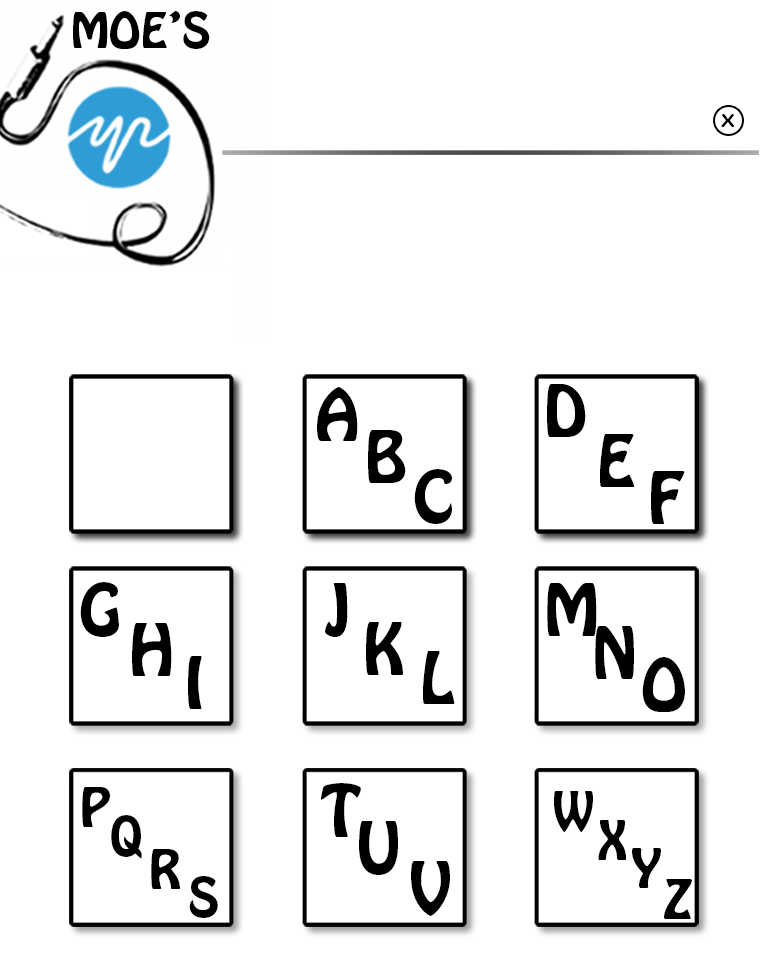
<style>
.page{position:relative;width:768px;height:960px;background:#ffffff}
.page>*{position:absolute;margin:0}
.t1{font:43.2px "HoboStd";color:#000000}
.t2{font:17.7px "ArialRoundedMTBold";color:#000000;scale:1.25 1}
.t3{font:64px "HoboStd";color:#000000}
.t4{font:48px "HoboStd";color:#000000}
</style>
<div class="page">
<p class="t1" style="left:73px;top:11px;width:137px;height:38px">MOE’S</p>
<p class="t2" style="left:721px;top:114px;width:14px;height:13px">X</p>
<p class="t3" style="left:317px;top:387px;width:41px;height:54px">A</p>
<p class="t3" style="left:547px;top:384px;width:39px;height:53px">D</p>
<p class="t3" style="left:368px;top:430px;width:38px;height:53px">B</p>
<p class="t3" style="left:600px;top:434px;width:35px;height:53px">E</p>
<p class="t3" style="left:414px;top:469px;width:38px;height:55px">C</p>
<p class="t3" style="left:651px;top:471px;width:34px;height:53px">F</p>
<p class="t3" style="left:80px;top:582px;width:39px;height:55px">G</p>
<p class="t3" style="left:325px;top:583px;width:23px;height:54px">J</p>
<p class="t3" style="left:547px;top:583px;width:50px;height:53px">M</p>
<p class="t3" style="left:132px;top:623px;width:40px;height:53px">H</p>
<p class="t3" style="left:366px;top:622px;width:37px;height:53px">K</p>
<p class="t3" style="left:595px;top:626px;width:39px;height:53px">N</p>
<p class="t3" style="left:423px;top:651px;width:32px;height:53px">L</p>
<p class="t3" style="left:188px;top:656px;width:14px;height:53px">I</p>
<p class="t3" style="left:642px;top:657px;width:43px;height:55px">O</p>
<p class="t3" style="left:321px;top:783px;width:40px;height:54px">T</p>
<p class="t4" style="left:82px;top:787px;width:28px;height:40px">P</p>
<p class="t4" style="left:554px;top:791px;width:39px;height:41px">W</p>
<p class="t4" style="left:111px;top:815px;width:31px;height:44px">Q</p>
<p class="t3" style="left:359px;top:821px;width:39px;height:54px">U</p>
<p class="t4" style="left:598px;top:820px;width:28px;height:40px">X</p>
<p class="t4" style="left:151px;top:849px;width:29px;height:40px">R</p>
<p class="t4" style="left:632px;top:848px;width:29px;height:40px">Y</p>
<p class="t3" style="left:411px;top:861px;width:39px;height:55px">V</p>
<p class="t4" style="left:189px;top:876px;width:29px;height:42px">S</p>
<p class="t4" style="left:664px;top:879px;width:28px;height:40px">Z</p>
</div>
